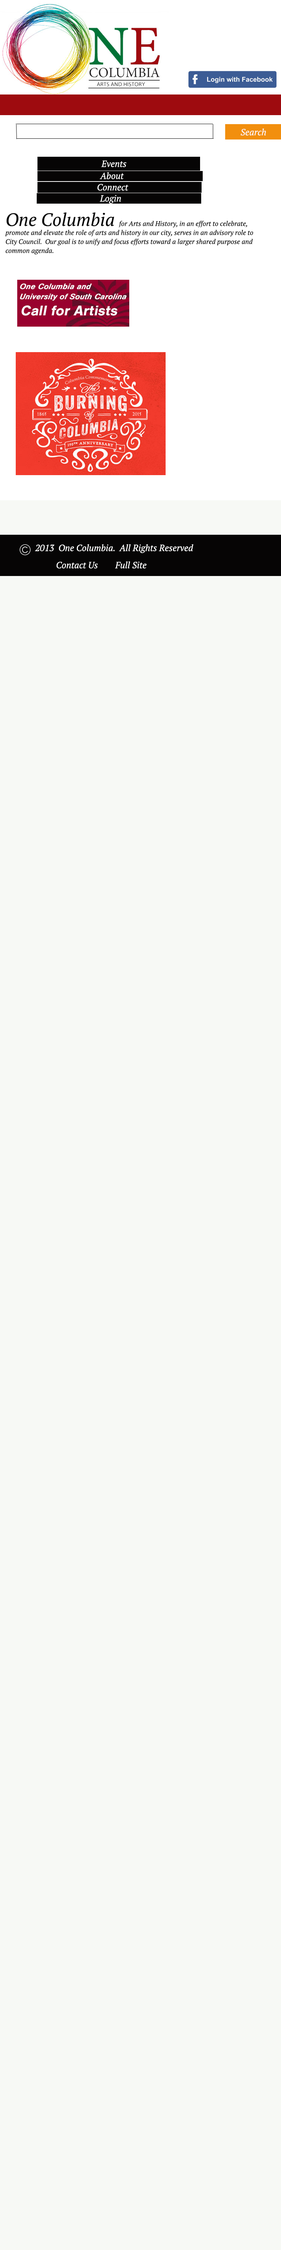
<style>
.page{position:relative;width:281px;height:2250px;background:#f7f9f5}
.page>*{position:absolute;margin:0}
.t1{font:9px "PTSerif-Italic";color:#fcf6f6}
.t2{font:9px "PTSerif-Italic";color:#ffffff}
.t3{font:6.8px/9px "PTSerif-Italic";color:#040404}
.t4{font:18px/9px "PTSerif-Italic";color:#040404}
</style>
<div class="page">
<p class="t1" style="left:241px;top:128px;width:25px;height:8px">Search</p>
<p class="t2" style="left:101px;top:160px;width:26px;height:7px">Events</p>
<p class="t2" style="left:100px;top:172px;width:24px;height:7px">About</p>
<p class="t2" style="left:98px;top:184px;width:31px;height:7px">Connect</p>
<p class="t2" style="left:100px;top:195px;width:21px;height:9px">Login</p>
<p class="t3" style="left:5px;top:212px;width:249px;height:43px"><span class="t4">One Columbia </span>for Arts and History, in an effort to celebrate, <br>promote and elevate the role of arts and history in our city, serves in an advisory role to <br>City Council.  Our goal is to unify and focus efforts toward a larger shared purpose and <br>common agenda.</p>
<p class="t2" style="left:35px;top:544px;width:159px;height:9px">2013  One Columbia.  All Rights Reserved</p>
<p class="t2" style="left:57px;top:561px;width:90px;height:7px">Contact Us        Full Site</p>
</div>
